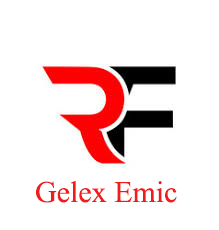
<style>
.page{position:relative;width:219px;height:230px;background:#ffffff}
.page>*{position:absolute;margin:0}
.t1{font:30px "TimesNewRomanPSMT";color:#f11b1b}
</style>
<div class="page">
<p class="t1" style="left:36px;top:181px;width:141px;height:22px">Gelex Emic</p>
</div>
